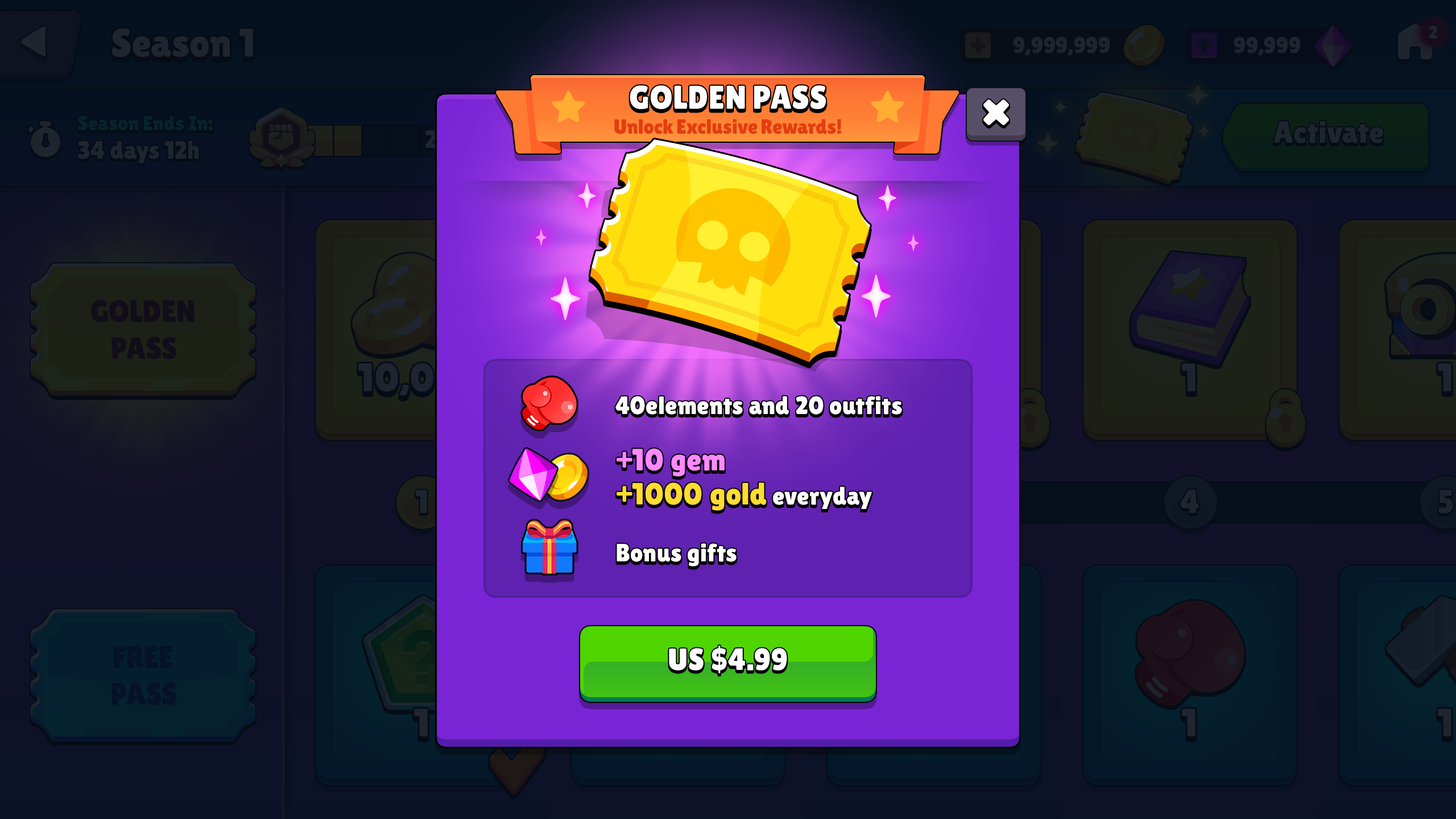
<style>
.page{position:relative;width:1456px;height:819px}
.page>*{position:absolute;margin:0}
.t1{font:33px "LilitaOne";color:#ffffff;text-transform:uppercase}
.t2{font:20.5px "LilitaOne";letter-spacing:-0.025em;color:#e43d0f}
.t3{font:25px "LilitaOne";letter-spacing:0.02em;color:#ffffff}
.t4{font:30.7px/34.1px "LilitaOne";letter-spacing:0.02em;color:#ffdc30}
.t5{font:30.7px/34.1px "LilitaOne";letter-spacing:0.02em;color:#ff89ff}
.t6{font:25px/34.1px "LilitaOne";letter-spacing:0.02em;color:#ffffff}
.t7{font:30.7px "LilitaOne";letter-spacing:0.02em;color:#ffffff}
</style>
<div class="page">
<p class="t1" style="left:630px;top:85px;width:196px;height:24px">Golden Pass</p>
<p class="t2" style="left:614px;top:119px;width:227px;height:15px">Unlock Exclusive Rewards!</p>
<p class="t3" style="left:615px;top:396px;width:287px;height:19px">40elements and 20 outfits</p>
<p class="t4" style="left:617px;top:448px;width:255px;height:63px"><span class="t5">+10 gem<br></span>+1000 gold <span class="t6">everyday</span></p>
<p class="t3" style="left:617px;top:543px;width:120px;height:23px">Bonus gifts</p>
<p class="t7" style="left:669px;top:646px;width:118px;height:27px">US $4.99</p>
</div>
